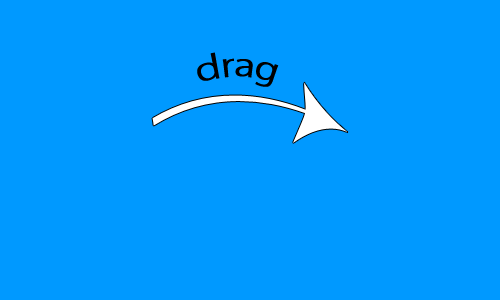
<style>
.page{position:relative;width:500px;height:300px;background:#0099ff}
.page>*{position:absolute;margin:0}
.t1{font:36px "MyriadPro-Regular";color:#000000}
</style>
<div class="page">
<p class="t1" style="left:197px;top:52px;width:82px;height:35px">drag</p>
</div>
